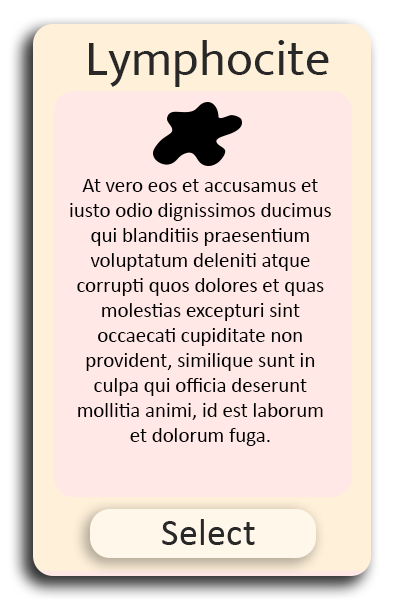
<style>
.page{position:relative;width:400px;height:600px;background:#ffe8e6}
.page>*{position:absolute;margin:0}
.t1{font:50px "Mukta-Regular";color:#282828}
.t2{font:20.8px "Calibri";color:#000000}
</style>
<div class="page">
<p class="t1" style="left:89px;top:40px;width:240px;height:47px">Lymphocite</p>
<p class="t2" style="left:70px;top:179px;width:261px;height:267px;text-align:center">At vero eos et accusamus et iusto odio dignissimos ducimus qui blanditiis praesentium voluptatum deleniti atque corrupti quos dolores et quas molestias excepturi sint occaecati cupiditate non provident, similique sunt in culpa qui officia deserunt mollitia animi, id est laborum et dolorum fuga.</p>
</div>
